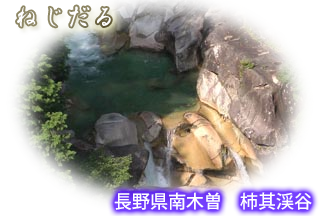
<style>
.page{position:relative;width:320px;height:216px}
.page>*{position:absolute;margin:0}
.t1{font:18px "KozGoPr6N-Medium";color:#ffffff}
</style>
<div class="page">
<p class="t1" style="left:114px;top:192px;width:198px;height:18px">長野県南木曽　柿其渓谷</p>
</div>
